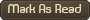
<style>
.page{position:relative;width:90px;height:20px}
.page>*{position:absolute;margin:0}
.t1{font:12px "PlanetEstyle";color:#e5dcb9}
</style>
<div class="page">
<p class="t1" style="left:8px;top:4px;width:73px;height:9px">Mark As Read</p>
</div>
